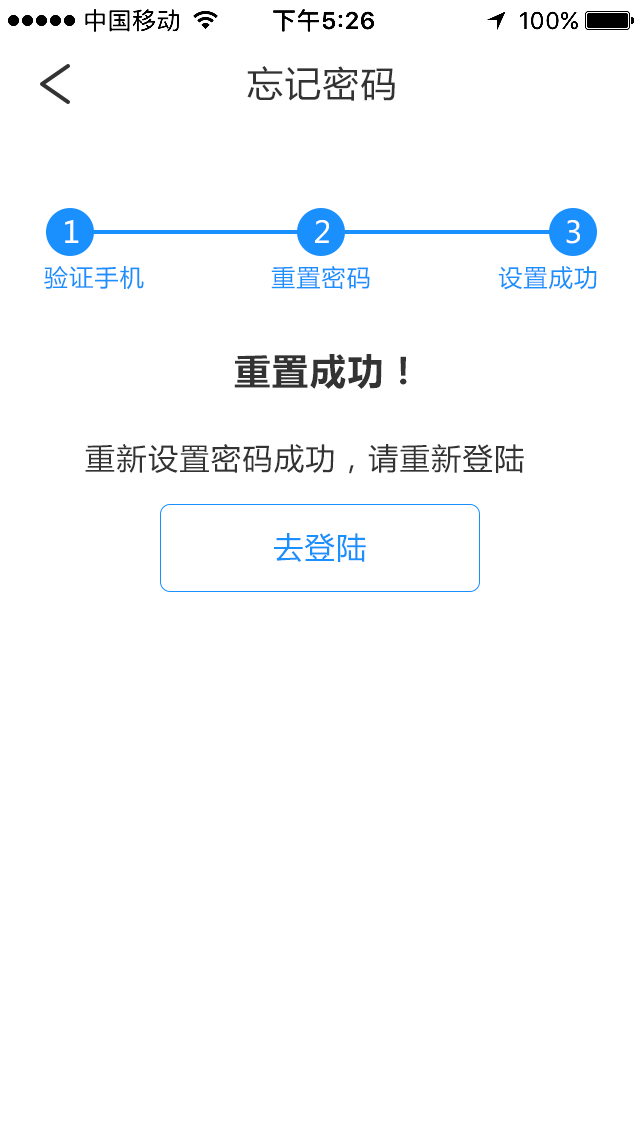
<style>
.page{position:relative;width:640px;height:1136px;background:#ffffff}
.page>*{position:absolute;margin:0}
.t1{font:36px "MicrosoftYaHei";letter-spacing:0.05em;color:#333333}
.t2{font:30.1px "MicrosoftYaHei";letter-spacing:0.05em;color:#ffffff}
.t3{font:24.1px "MicrosoftYaHei";letter-spacing:0.05em;color:#1990fe}
.t4{font:36px "MicrosoftYaHei-Bold";letter-spacing:0.05em;color:#333333}
.t5{font:30px "MicrosoftYaHei";letter-spacing:0.05em;color:#333333}
.t6{font:30px "MicrosoftYaHei";letter-spacing:0.05em;color:#1990fe}
</style>
<div class="page">
<p class="t1" style="left:247px;top:66px;width:148px;height:35px">忘记密码</p>
<p class="t2" style="left:65px;top:219px;width:14px;height:24px">1</p>
<p class="t2" style="left:315px;top:220px;width:14px;height:23px">2</p>
<p class="t2" style="left:566px;top:220px;width:14px;height:24px">3</p>
<p class="t3" style="left:44px;top:266px;width:100px;height:24px">验证手机</p>
<p class="t3" style="left:271px;top:266px;width:99px;height:23px">重置密码</p>
<p class="t3" style="left:498px;top:266px;width:99px;height:24px">设置成功</p>
<p class="t4" style="left:234px;top:354px;width:173px;height:35px">重置成功！</p>
<p class="t5" style="left:85px;top:444px;width:439px;height:30px">重新设置密码成功，请重新登陆</p>
<p class="t6" style="left:274px;top:533px;width:92px;height:29px">去登陆</p>
</div>
